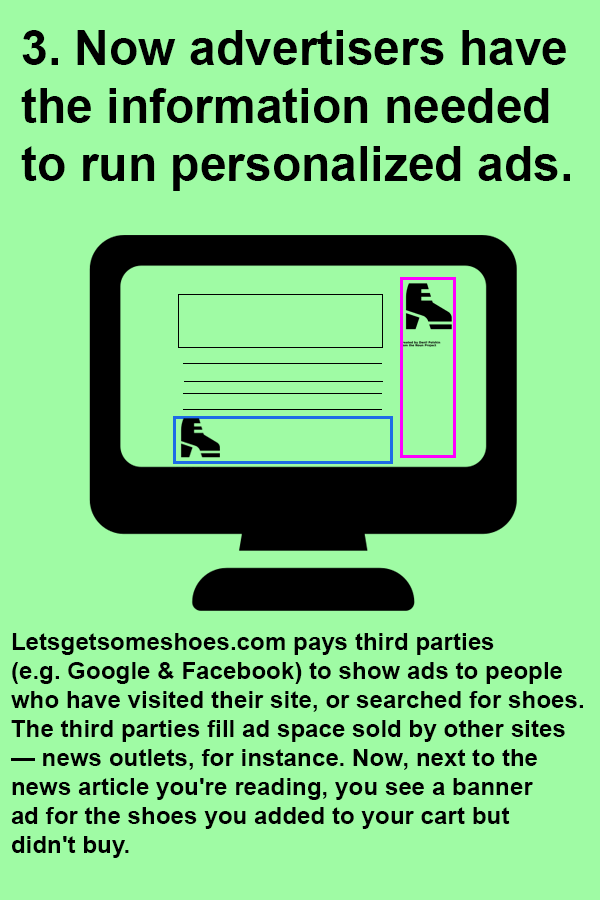
<style>
.page{position:relative;width:600px;height:900px;background:#9ffba4}
.page>*{position:absolute;margin:0}
.t1{font:48px "Arial-BoldMT";color:#000000}
.t2{font:24.2px "Arial-BoldMT";color:#000000}
</style>
<div class="page">
<p class="t1" style="left:21px;top:30px;width:549px;height:161px">3. Now advertisers have <br>the information needed <br>to run personalized ads.</p>
<p class="t2" style="left:11px;top:633px;width:572px;height:225px">Letsgetsomeshoes.com pays third parties <br>(e.g. Google &amp; Facebook) to show ads to people <br>who have visited their site, or searched for shoes. <br>The third parties fill ad space sold by other sites <br>— news outlets, for instance. Now, next to the <br>news article you're reading, you see a banner <br>ad for the shoes you added to your cart but <br>didn't buy.</p>
</div>
